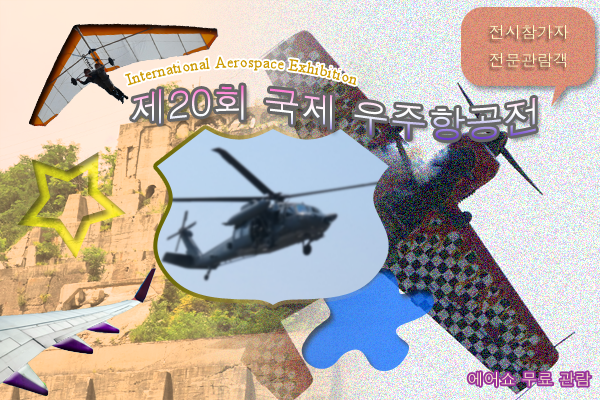
<style>
.page{position:relative;width:600px;height:400px}
.page>*{position:absolute;margin:0}
.t1{font:16px "Dotum";color:#ffffcc}
.t2{font:16px "TimesNewRomanPSMT";color:#cc9900}
.t3{font:38px "Dotum"}
</style>
<div class="page">
<p class="t1" style="left:490px;top:25px;width:79px;height:43px">전시참가자<br>전문관람객</p>
<p class="t2" style="left:125px;top:56px;width:231px;height:30px">International Aerospace Exhibition</p>
<p class="t3" style="left:132px;top:85px;width:404px;height:56px">제20회 국제 우주항공전</p>
<p class="t1" style="left:468px;top:372px;width:123px;height:15px">에어쇼 무료 관람</p>
</div>
